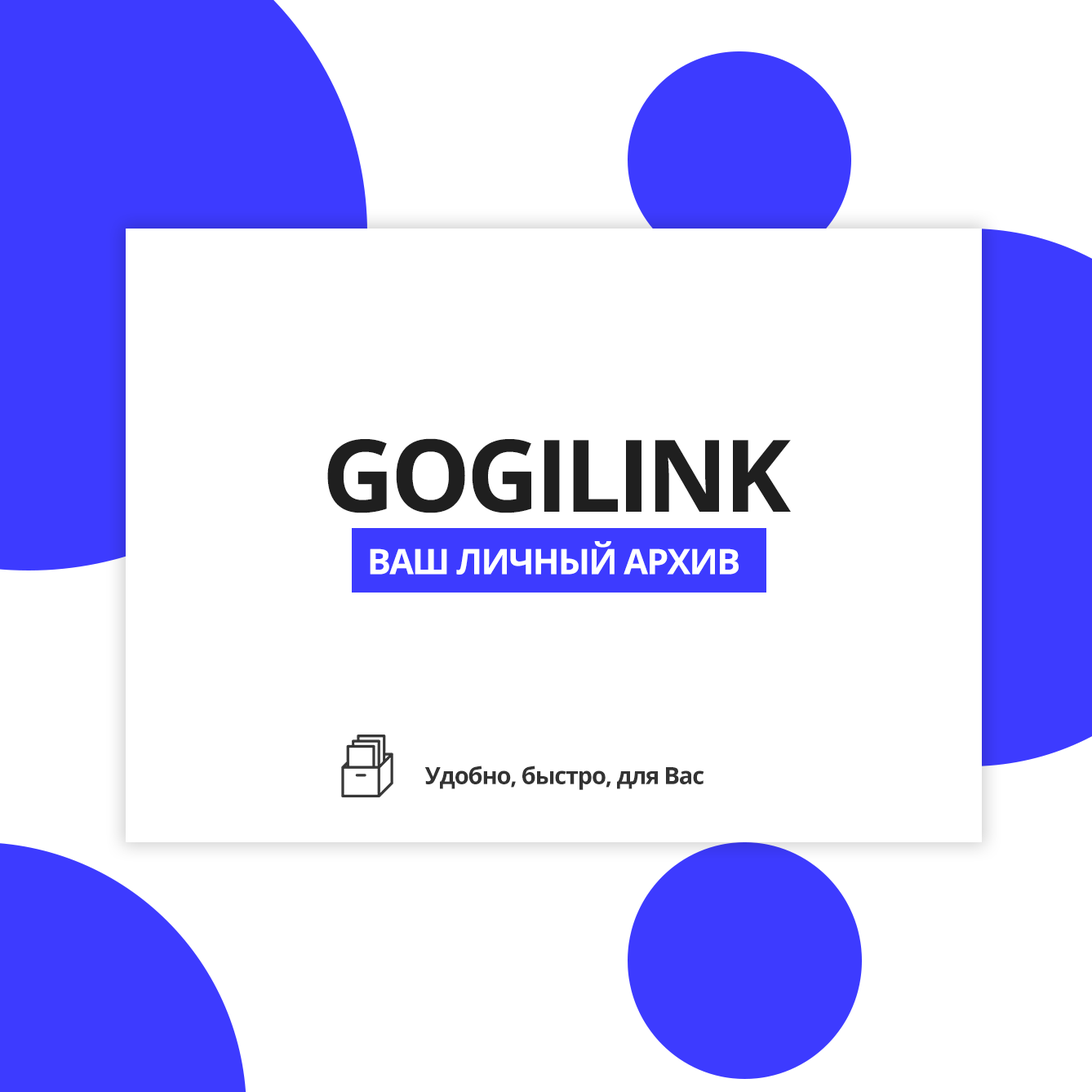
<style>
.page{position:relative;width:1092px;height:1092px;background:#ffffff}
.page>*{position:absolute;margin:0}
.t1{font:100.4px "OpenSans-Bold";letter-spacing:-0.04em;color:#1f1f1f;text-transform:uppercase}
.t2{font:35.1px "OpenSans-Bold";letter-spacing:-0.04em;color:#ffffff;text-transform:uppercase}
.t3{font:23.7px "OpenSans-Bold";letter-spacing:-0.04em;color:#333333}
</style>
<div class="page">
<p class="t1" style="left:327px;top:438px;width:464px;height:75px">Gogilink</p>
<p class="t2" style="left:370px;top:541px;width:369px;height:34px">Ваш личный архив</p>
<p class="t3" style="left:424px;top:766px;width:280px;height:24px">Удобно, быстро, для Вас</p>
</div>
